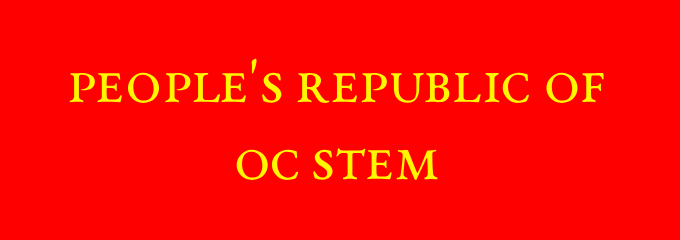
<style>
.page{position:relative;width:680px;height:240px;background:#ff0000}
.page>*{position:absolute;margin:0}
.t1{font:64px "EBGaramond12-AllSC";color:#fff600}
</style>
<div class="page">
<p class="t1" style="left:69px;top:58px;width:535px;height:123px;text-align:center">People's Republic of<br>OC STEM</p>
</div>
